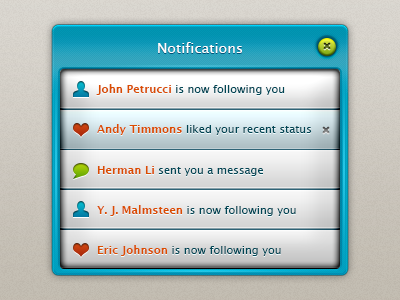
<style>
.page{position:relative;width:400px;height:300px}
.page>*{position:absolute;margin:0}
.t1{font:14px "LucidaGrande";color:#ffffff}
.t2{font:11px "LucidaGrande";color:#004554}
.t3{font:11px "LucidaGrande-Bold";color:#da4d00}
.t4{font:11px "LucidaGrande-Bold";color:#db4d00}
</style>
<div class="page">
<p class="t1" style="left:158px;top:42px;width:84px;height:11px">Notifications</p>
<p class="t2" style="left:96px;top:84px;width:189px;height:11px"><span class="t3">John Petrucci </span>is now following you</p>
<p class="t2" style="left:97px;top:124px;width:215px;height:11px"><span class="t4">Andy Timmons </span>liked your recent status</p>
<p class="t2" style="left:97px;top:166px;width:166px;height:10px"><span class="t4">Herman Li </span>sent you a message</p>
<p class="t2" style="left:97px;top:205px;width:199px;height:11px"><span class="t4">Y. J. Malmsteen </span>is now following you</p>
<p class="t2" style="left:97px;top:245px;width:184px;height:11px"><span class="t4">Eric Johnson </span>is now following you</p>
</div>
